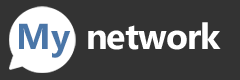
<style>
.page{position:relative;width:240px;height:80px;background:#333333}
.page>*{position:absolute;margin:0}
.t1{font:36px "SegoeUI-Bold";letter-spacing:-0.025em;color:#ffffff}
.t2{font:36px "SegoeUI-Bold";color:#4a76a8}
</style>
<div class="page">
<p class="t1" style="left:19px;top:22px;width:202px;height:36px"><span class="t2">My  </span>network</p>
</div>
